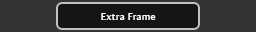
<style>
.page{position:relative;width:256px;height:32px;background:#333333}
.page>*{position:absolute;margin:0}
.t1{font:9.8px "AmiraParadiso";letter-spacing:0.05em;color:#ffffff}
</style>
<div class="page">
<p class="t1" style="left:101px;top:13px;width:55px;height:7px">Extra Frame</p>
</div>
